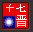
<style>
.page{position:relative;width:33px;height:32px;background:#f20000}
.page>*{position:absolute;margin:0}
.t1{font:10.4px "SimSun";color:#ffffff}
.t2{font:11.7px "SimSun";color:#ffffff}
</style>
<div class="page">
<p class="t1" style="left:6px;top:4px;width:20px;height:8px">十七</p>
<p class="t2" style="left:16px;top:15px;width:11px;height:12px">晋</p>
</div>
